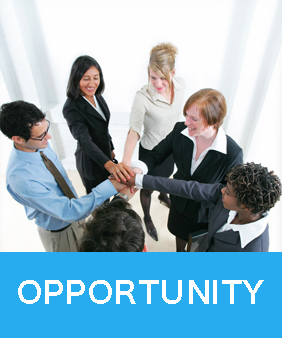
<style>
.page{position:relative;width:282px;height:338px;background:#28acf0}
.page>*{position:absolute;margin:0}
.t1{font:29.9px "HiraginoSansGB-W6";letter-spacing:0.025em;color:#ffffff}
</style>
<div class="page">
<p class="t1" style="left:18px;top:280px;width:246px;height:24px">OPPORTUNITY</p>
</div>
